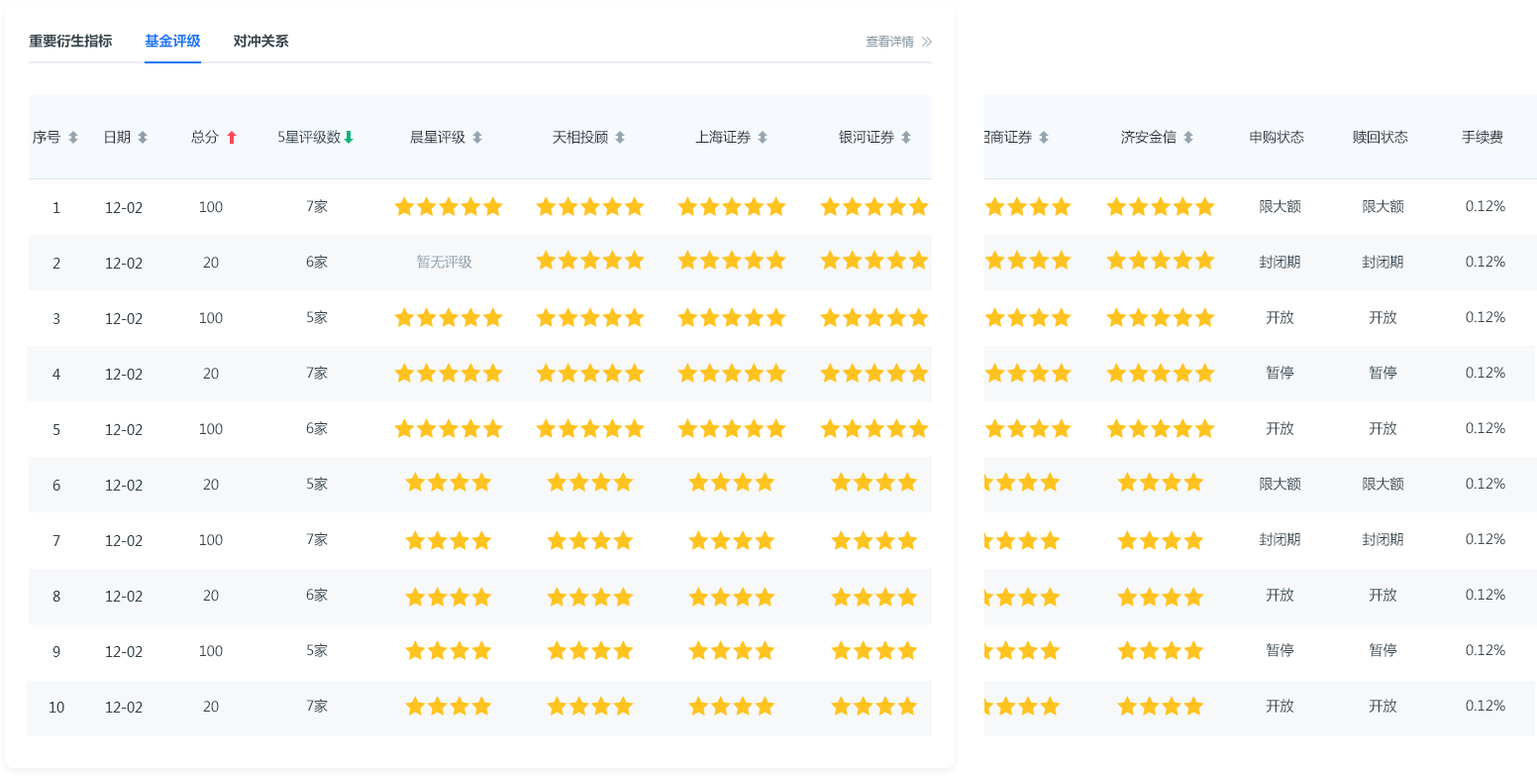
<style>
.page{position:relative;width:1537px;height:776px;background:#ffffff}
.page>*{position:absolute;margin:0}
.t1{font:13.9px "MicrosoftYaHei-Bold";color:#34444d}
.t2{font:13.9px "MicrosoftYaHei-Bold";color:#1a77f3}
.t3{font:11.9px "MicrosoftYaHei";color:#8e9eab}
.t4{font:13.9px "MicrosoftYaHei";color:#273037}
.t5{font:13.9px "MicrosoftYaHei";color:#34444d}
.t6{font:13.9px/55.5px "MicrosoftYaHei";color:#34444d}
.t7{font:13.9px "MicrosoftYaHei";color:#8e9eab}
.t8{font:13.9px "MicrosoftYaHei";color:#0db578}
</style>
<div class="page">
<p class="t1" style="left:29px;top:34px;width:260px;height:14px">重要衍生指标<span class="t2">        基金评级</span>        对冲关系</p>
<p class="t3" style="left:867px;top:36px;width:47px;height:12px">查看详情</p>
<p class="t4" style="left:33px;top:130px;width:27px;height:14px">序号</p>
<p class="t4" style="left:105px;top:130px;width:25px;height:14px">日期</p>
<p class="t4" style="left:191px;top:130px;width:28px;height:14px">总分</p>
<p class="t5" style="left:278px;top:130px;width:63px;height:14px">5星评级数</p>
<p class="t4" style="left:410px;top:130px;width:56px;height:14px">晨星评级</p>
<p class="t4" style="left:553px;top:130px;width:55px;height:14px">天相投顾</p>
<p class="t4" style="left:695px;top:130px;width:56px;height:15px">上海证券</p>
<p class="t4" style="left:839px;top:130px;width:55px;height:15px">银河证券</p>
<p class="t4" style="left:977px;top:130px;width:55px;height:15px">招商证券</p>
<p class="t4" style="left:1121px;top:130px;width:56px;height:14px">济安金信</p>
<p class="t4" style="left:1250px;top:130px;width:55px;height:14px">申购状态</p>
<p class="t4" style="left:1353px;top:130px;width:56px;height:14px">赎回状态</p>
<p class="t4" style="left:1462px;top:130px;width:42px;height:14px">手续费</p>
<p class="t6" style="left:106px;top:147px;width:37px;height:565px;text-align:center">12-02<br>12-02<br>12-02<br>12-02<br>12-02<br>12-02<br>12-02<br>12-02<br>12-02<br>12-02<br>12-02</p>
<p class="t6" style="left:200px;top:146px;width:23px;height:566px;text-align:center">20<br>100<br>20<br>100<br>20<br>100<br>20<br>100<br>20<br>100<br>20<br>100</p>
<p class="t6" style="left:306px;top:144px;width:22px;height:568px;text-align:center">5家<br>7家<br>6家<br>5家<br>7家<br>6家<br>5家<br>7家<br>6家<br>5家<br>7家<br>6家<br>5家<br>7家<br>6家</p>
<p class="t6" style="left:1259px;top:144px;width:43px;height:568px;text-align:center">开放<br>限大额<br>封闭期<br>开放<br>暂停<br>开放<br>限大额<br>封闭期<br>开放<br>暂停<br>开放<br>限大额<br>封闭期<br>开放<br>暂停</p>
<p class="t6" style="left:1362px;top:144px;width:43px;height:568px;text-align:center">开放<br>限大额<br>封闭期<br>开放<br>暂停<br>开放<br>限大额<br>封闭期<br>开放<br>暂停<br>开放<br>限大额<br>封闭期<br>开放<br>暂停</p>
<p class="t6" style="left:1466px;top:145px;width:40px;height:566px;text-align:center">0.12%<br>0.12%<br>0.12%<br>0.12%<br>0.12%<br>0.12%<br>0.12%<br>0.12%<br>0.12%<br>0.12%<br>0.12%</p>
<p class="t6" style="left:50px;top:202px;width:14px;height:510px;text-align:center">1<br>2<br>3<br>4<br>5<br>6<br>7<br>8<br>9<br>10<br>11</p>
<p class="t7" style="left:417px;top:255px;width:56px;height:13px"><span class="t8"><br><br></span>暂无评级</p>
</div>
